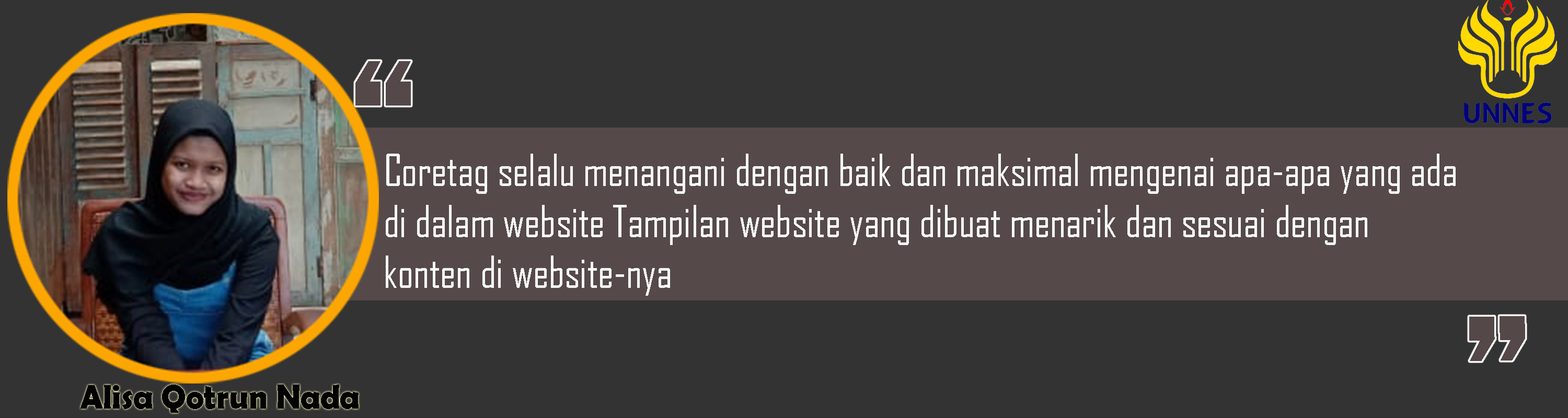
<style>
.page{position:relative;width:1568px;height:418px;background:#333333}
.page>*{position:absolute;margin:0}
.t1{font:155.4px "FranklinGothic-Heavy";color:#554849}
.t2{font:42.4px "AgencyFB-Reg";color:#f6faf8}
.t3{font:34.7px "BerlinSansFBDemi-Bold";color:#020202;scale:0.96 1}
</style>
<div class="page">
<p class="t1" style="left:355px;top:61px;width:56px;height:45px">”</p>
<p class="t2" style="left:386px;top:154px;width:1070px;height:142px;text-align:right">Coretag selalu menangani dengan baik dan maksimal mengenai apa-apa yang ada <br>di dalam website Tampilan website yang dibuat menarik dan sesuai dengan <br>konten di website-nya</p>
<p class="t1" style="left:1469px;top:316px;width:56px;height:45px;rotate:179deg">”</p>
<p class="t3" style="left:80px;top:385px;width:279px;height:28px">Alisa Qotrun Nada</p>
</div>
